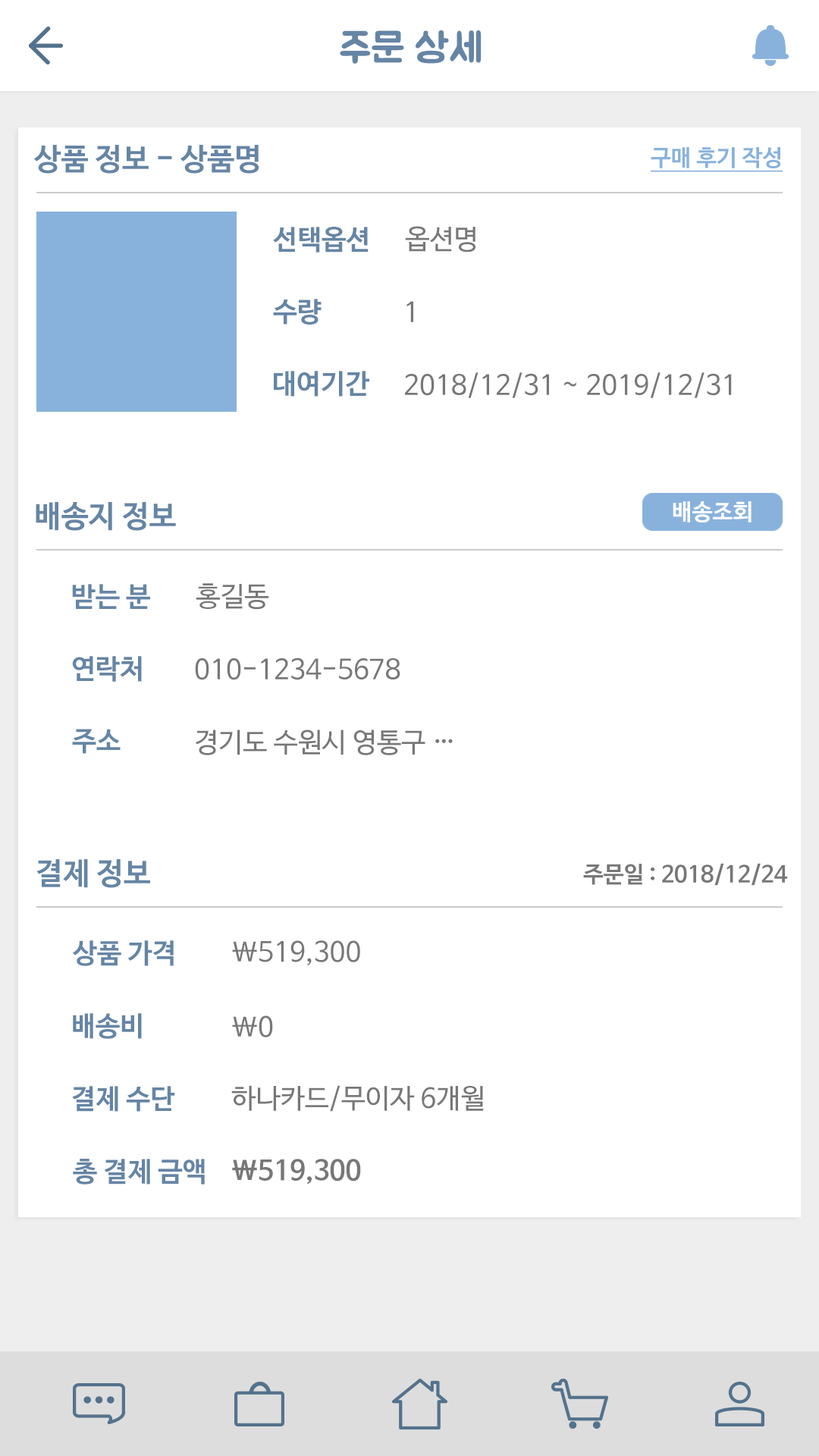
<style>
.page{position:relative;width:819px;height:1456px;background:#ffffff}
.page>*{position:absolute;margin:0}
.t1{font:40.9px "BMJUA";color:#6585a5}
.t2{font:30.3px "NanumBarunGothicBold";color:#6585a5}
.t3{font:22.7px "NanumBarunGothicBold";color:#88b2dc;text-decoration:underline}
.t4{font:27.3px "NanumBarunGothicBold";color:#6585a5}
.t5{font:27.3px "NanumBarunGothic";color:#777777}
.t6{font:22.7px "NanumBarunGothicBold";color:#ffffff}
.t7{font:22.7px "NanumBarunGothicBold";color:#777777}
.t8{font:27.3px "NanumBarunGothicBold";color:#777777}
</style>
<div class="page">
<p class="t1" style="left:340px;top:30px;width:142px;height:34px">주문 상세</p>
<p class="t2" style="left:33px;top:145px;width:226px;height:29px">상품 정보 - 상품명</p>
<p class="t3" style="left:651px;top:147px;width:132px;height:25px">구매 후기 작성</p>
<p class="t4" style="left:273px;top:227px;width:96px;height:26px">선택옵션</p>
<p class="t5" style="left:405px;top:226px;width:70px;height:27px">옵션명</p>
<p class="t4" style="left:273px;top:299px;width:49px;height:26px">수량</p>
<p class="t5" style="left:406px;top:301px;width:7px;height:21px">1</p>
<p class="t4" style="left:274px;top:371px;width:95px;height:26px">대여기간</p>
<p class="t5" style="left:405px;top:372px;width:327px;height:26px">2018/12/31 ~ 2019/12/31</p>
<p class="t2" style="left:36px;top:502px;width:140px;height:29px">배송지 정보</p>
<p class="t6" style="left:673px;top:501px;width:78px;height:21px">배송조회</p>
<p class="t4" style="left:72px;top:584px;width:78px;height:25px">받는 분</p>
<p class="t5" style="left:196px;top:583px;width:73px;height:27px">홍길동</p>
<p class="t4" style="left:72px;top:656px;width:70px;height:26px">연락처</p>
<p class="t5" style="left:195px;top:657px;width:205px;height:23px">010-1234-5678</p>
<p class="t4" style="left:72px;top:729px;width:49px;height:25px">주소</p>
<p class="t5" style="left:195px;top:730px;width:258px;height:25px">경기도 수원시 영통구 …</p>
<p class="t2" style="left:36px;top:859px;width:114px;height:29px">결제 정보</p>
<p class="t7" style="left:583px;top:863px;width:205px;height:23px">주문일 : 2018/12/24</p>
<p class="t4" style="left:72px;top:940px;width:102px;height:26px">상품 가격</p>
<p class="t5" style="left:232px;top:940px;width:128px;height:25px">\519,300</p>
<p class="t4" style="left:73px;top:1013px;width:69px;height:26px">배송비</p>
<p class="t5" style="left:232px;top:1015px;width:41px;height:22px">\0</p>
<p class="t4" style="left:72px;top:1086px;width:103px;height:26px">결제 수단</p>
<p class="t5" style="left:231px;top:1085px;width:253px;height:27px">하나카드/무이자 6개월</p>
<p class="t4" style="left:73px;top:1159px;width:132px;height:26px">총 결제 금액</p>
<p class="t8" style="left:232px;top:1159px;width:129px;height:26px">\519,300</p>
</div>
